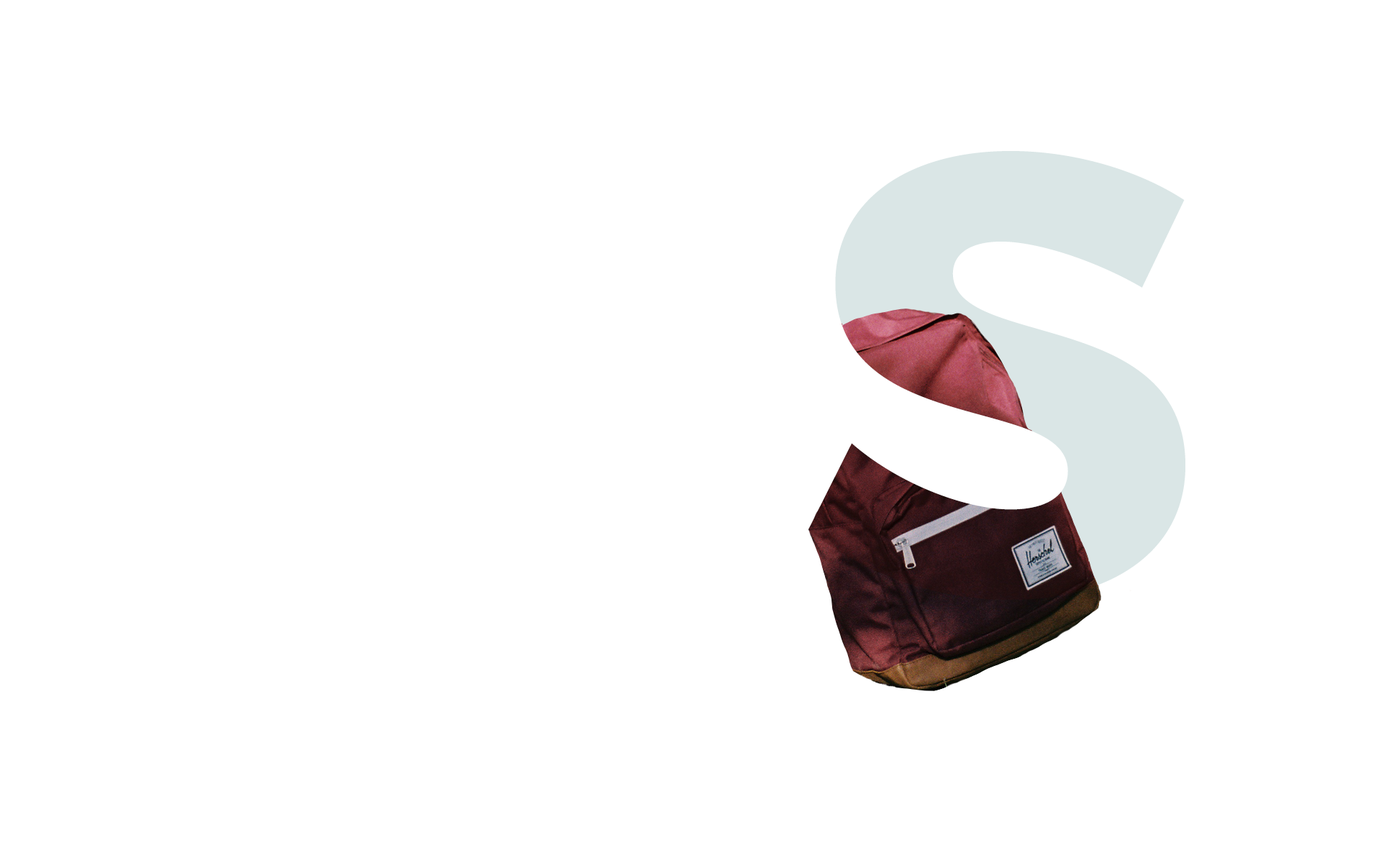
<style>
.page{position:relative;width:1381px;height:863px;background:#ffffff}
.page>*{position:absolute;margin:0}
.t1{font:628.8px "Montserrat-Bold";letter-spacing:0.06em}
</style>
<div class="page">
<p class="t1" style="left:808px;top:151px;width:378px;height:450px">S</p>
</div>
